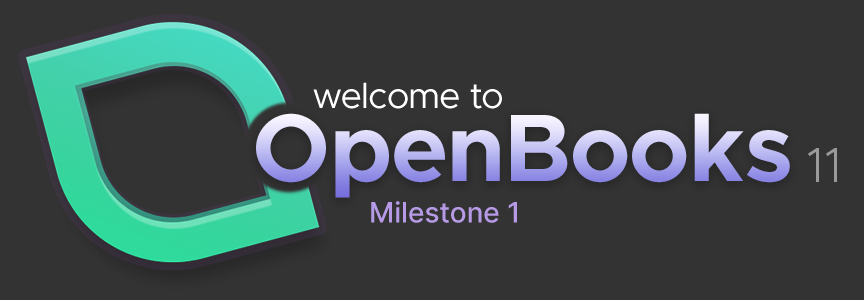
<style>
.page{position:relative;width:864px;height:300px;background:#333333}
.page>*{position:absolute;margin:0}
.t1{font:36px "Metropolis-Regular";color:#ffffff}
.t2{font:96px "Metropolis-Bold"}
.t3{font:50px "Metropolis-Light";color:#9a9a9a}
.t4{font:28px "Inter-Medium";color:#b69ae6}
</style>
<div class="page">
<p class="t1" style="left:313px;top:82px;width:189px;height:27px">welcome to</p>
<p class="t2" style="left:256px;top:113px;width:534px;height:85px">OpenBooks</p>
<p class="t3" style="left:808px;top:148px;width:29px;height:34px">11</p>
<p class="t4" style="left:371px;top:201px;width:146px;height:22px">Milestone 1</p>
</div>
